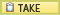
<style>
.page{position:relative;width:60px;height:15px;background:#cccc66}
.page>*{position:absolute;margin:0}
.t1{font:12px "Delicious-Roman";color:#333333}
</style>
<div class="page">
<p class="t1" style="left:18px;top:4px;width:22px;height:8px">TAKE</p>
</div>
